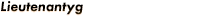
<style>
.page{position:relative;width:198px;height:16px;background:#ffffff}
.page>*{position:absolute;margin:0}
.t1{font:14px "FuturaPT-HeavyObl";color:#000000}
</style>
<div class="page">
<p class="t1" style="left:1px;top:1px;width:82px;height:14px">Lieutenantyg</p>
</div>
